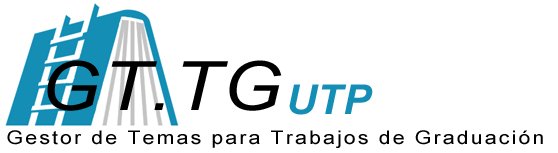
<style>
.page{position:relative;width:558px;height:153px;background:#ffffff}
.page>*{position:absolute;margin:0}
.t1{font:68px "Arial-ItalicMT";letter-spacing:0.02em;color:#000000;scale:1.14 1}
.t2{font:41.3px "Arial-BoldItalicMT";letter-spacing:0.02em;color:#148eb5}
.t3{font:18.8px "ArialMT";letter-spacing:0.1em;color:#000000;scale:1.14 1}
</style>
<div class="page">
<p class="t1" style="left:47px;top:60px;width:235px;height:51px">GT.TG</p>
<p class="t2" style="left:289px;top:84px;width:84px;height:31px">UTP</p>
<p class="t3" style="left:7px;top:130px;width:536px;height:18px">Gestor de Temas para Trabajos de Graduación</p>
</div>
